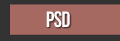
<style>
.page{position:relative;width:120px;height:41px;background:#a66962}
.page>*{position:absolute;margin:0}
.t1{font:22px "BebasNeue";letter-spacing:-0.025em;color:#fcfafa}
</style>
<div class="page">
<p class="t1" style="left:46px;top:11px;width:24px;height:17px">PSD</p>
</div>
